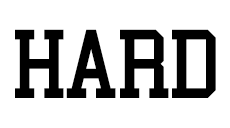
<style>
.page{position:relative;width:230px;height:128px;background:#ffffff}
.page>*{position:absolute;margin:0}
.t1{font:99.7px "College";letter-spacing:-0.06em;color:#000000}
</style>
<div class="page">
<p class="t1" style="left:15px;top:29px;width:201px;height:69px">HARD</p>
</div>
